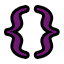
<style>
.page{position:relative;width:64px;height:64px;background:#ffffff}
.page>*{position:absolute;margin:0}
.t1{font:53.5px "FelixTitlingMT";color:#711a73;scale:1.35 1}
</style>
<div class="page">
<p class="t1" style="left:7px;top:8px;width:50px;height:48px">{}</p>
</div>
